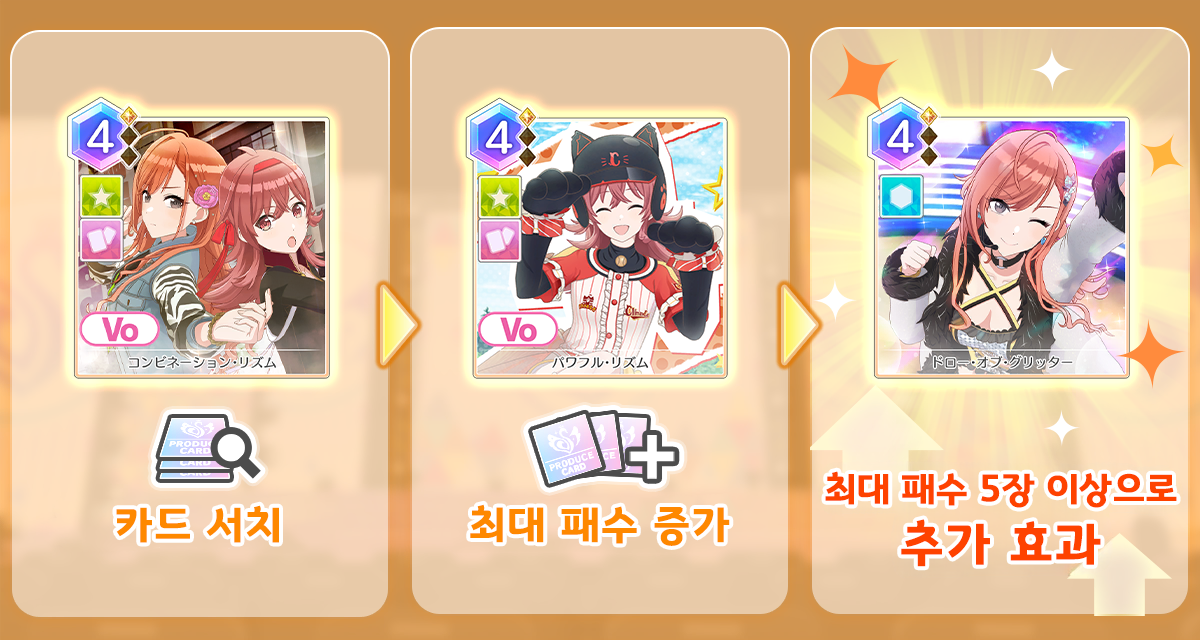
<style>
.page{position:relative;width:1200px;height:640px}
.page>*{position:absolute;margin:0}
.t1{font:37.3px "GyeonggiTitleB";letter-spacing:0.02em;color:#fe4200}
.t2{font:42.7px "GyeonggiTitleB";letter-spacing:0.05em;color:#fe8800}
.t3{font:50.7px "GyeonggiTitleB";letter-spacing:0.05em;color:#fe4200}
</style>
<div class="page">
<p class="t1" style="left:825px;top:471px;width:352px;height:37px">최대 패수 5장 이상으로</p>
<p class="t2" style="left:116px;top:505px;width:163px;height:38px">카드 서치</p>
<p class="t2" style="left:470px;top:504px;width:260px;height:42px">최대 패수 증가</p>
<p class="t3" style="left:901px;top:519px;width:200px;height:48px">추가 효과</p>
</div>
